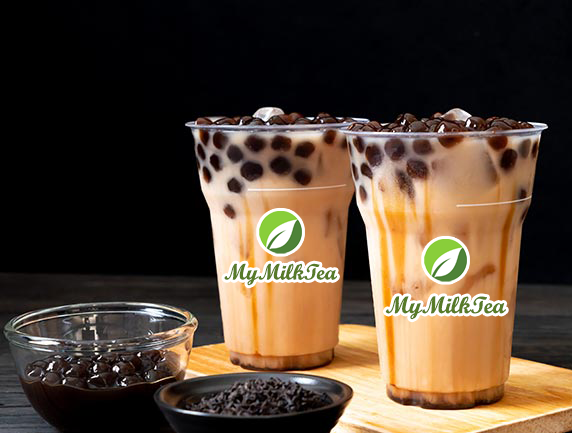
<style>
.page{position:relative;width:572px;height:433px}
.page>*{position:absolute;margin:0}
.t1{font:22.4px "ScriptMTBold";color:#577a28}
.t2{font:23.9px "ScriptMTBold";color:#577a28}
</style>
<div class="page">
<p class="t1" style="left:224px;top:263px;width:113px;height:23px">MyMilkTea</p>
<p class="t2" style="left:385px;top:296px;width:121px;height:24px">MyMilkTea</p>
</div>
